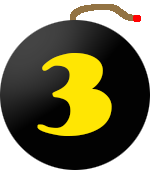
<style>
.page{position:relative;width:150px;height:170px;background:#020202}
.page>*{position:absolute;margin:0}
.t1{font:108.3px "GoudyStout";color:#ffe603}
</style>
<div class="page">
<p class="t1" style="left:37px;top:53px;width:75px;height:83px">3</p>
</div>
